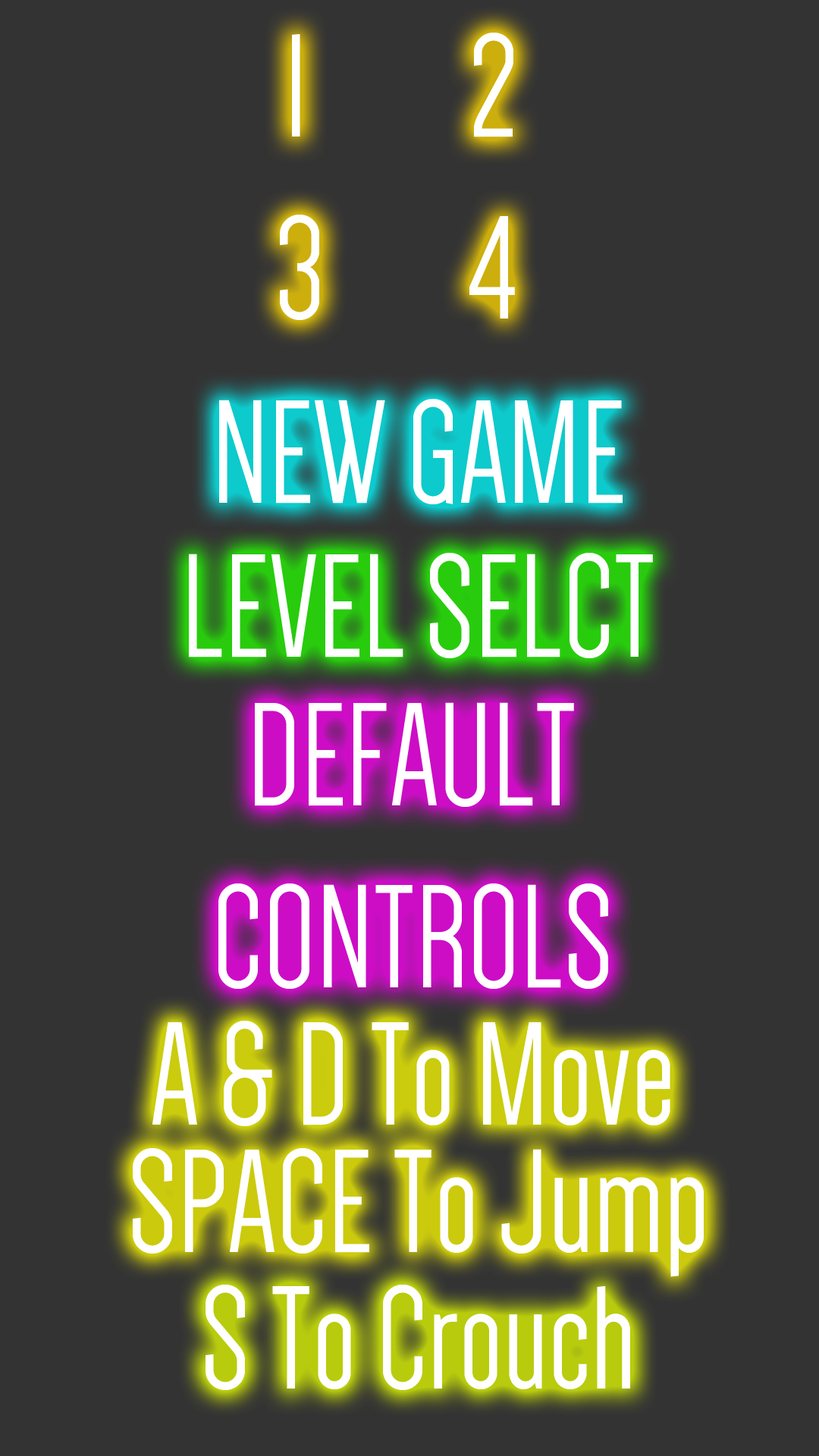
<style>
.page{position:relative;width:819px;height:1456px;background:#333333}
.page>*{position:absolute;margin:0}
.t1{font:151.7px "Dense-Regular";color:#ffffff}
.t2{font:54.6px "Dense-Regular";color:#ffffff}
</style>
<div class="page">
<p class="t1" style="left:280px;top:33px;width:235px;height:287px;text-align:center"><span class="t2">  </span>  1        2 <br>     3 4</p>
<p class="t1" style="left:219px;top:399px;width:404px;height:105px">NEW GAME</p>
<p class="t1" style="left:189px;top:553px;width:464px;height:105px">LEVEL SELCT</p>
<p class="t1" style="left:218px;top:702px;width:390px;height:287px;text-align:center">DEFAULT CONTROLS</p>
<p class="t1" style="left:152px;top:1021px;width:518px;height:105px">A &amp; D To Move</p>
<p class="t1" style="left:133px;top:1148px;width:571px;height:129px">SPACE To Jump</p>
<p class="t1" style="left:206px;top:1285px;width:424px;height:105px">S To Crouch</p>
</div>
